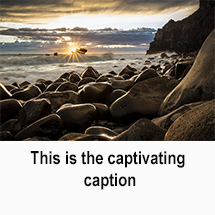
<style>
.page{position:relative;width:215px;height:215px;background:#fbfbfb}
.page>*{position:absolute;margin:0}
.t1{font:18px "ArialNarrow-Bold";color:#080808}
</style>
<div class="page">
<p class="t1" style="left:30px;top:151px;width:155px;height:39px;text-align:center">This is the captivating <br>caption</p>
</div>
